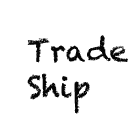
<style>
.page{position:relative;width:140px;height:140px;background:#ffffff}
.page>*{position:absolute;margin:0}
.t1{font:30px "Chalkduster";color:#050505}
</style>
<div class="page">
<p class="t1" style="left:27px;top:35px;width:101px;height:79px">Trade<br>Ship</p>
</div>
